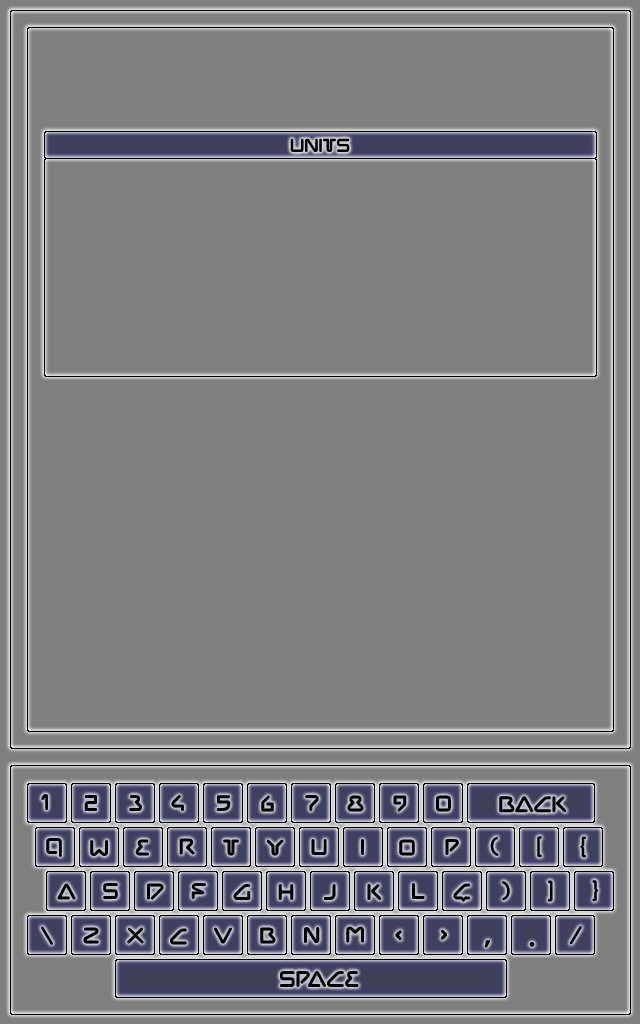
<style>
.page{position:relative;width:640px;height:1024px;background:#7f7f7f}
.page>*{position:absolute;margin:0}
.t1{font:20px "Chilopod-Regular";color:#000000}
.t2{font:24px "Chilopod-Regular";color:#000000}
</style>
<div class="page">
<p class="t1" style="left:290px;top:138px;width:60px;height:14px">Units</p>
<p class="t2" style="left:41px;top:794px;width:7px;height:16px">1</p>
<p class="t2" style="left:84px;top:795px;width:13px;height:16px">2</p>
<p class="t2" style="left:129px;top:795px;width:13px;height:16px">3</p>
<p class="t2" style="left:171px;top:795px;width:13px;height:16px">4</p>
<p class="t2" style="left:216px;top:795px;width:15px;height:16px">5</p>
<p class="t2" style="left:261px;top:795px;width:13px;height:17px">6</p>
<p class="t2" style="left:305px;top:795px;width:14px;height:16px">7</p>
<p class="t2" style="left:347px;top:795px;width:17px;height:17px">8</p>
<p class="t2" style="left:393px;top:795px;width:14px;height:17px">9</p>
<p class="t2" style="left:436px;top:795px;width:15px;height:17px">0</p>
<p class="t2" style="left:499px;top:796px;width:68px;height:17px">Back</p>
<p class="t2" style="left:46px;top:838px;width:16px;height:19px">q</p>
<p class="t2" style="left:90px;top:840px;width:18px;height:16px">w</p>
<p class="t2" style="left:135px;top:839px;width:14px;height:17px">e</p>
<p class="t2" style="left:179px;top:838px;width:16px;height:17px">r</p>
<p class="t2" style="left:223px;top:839px;width:16px;height:17px">t</p>
<p class="t2" style="left:266px;top:839px;width:18px;height:17px">y</p>
<p class="t2" style="left:311px;top:839px;width:16px;height:16px">u</p>
<p class="t2" style="left:361px;top:839px;width:3px;height:16px">i</p>
<p class="t2" style="left:399px;top:839px;width:16px;height:17px">o</p>
<p class="t2" style="left:445px;top:839px;width:14px;height:16px">p</p>
<p class="t2" style="left:490px;top:836px;width:9px;height:20px">(</p>
<p class="t2" style="left:537px;top:836px;width:5px;height:22px">[</p>
<p class="t2" style="left:580px;top:836px;width:6px;height:22px">{</p>
<p class="t2" style="left:502px;top:881px;width:8px;height:20px">)</p>
<p class="t2" style="left:548px;top:880px;width:5px;height:22px">]</p>
<p class="t2" style="left:592px;top:880px;width:7px;height:22px">}</p>
<p class="t2" style="left:57px;top:883px;width:19px;height:17px">a</p>
<p class="t2" style="left:103px;top:883px;width:15px;height:16px">s</p>
<p class="t2" style="left:147px;top:883px;width:17px;height:17px">d</p>
<p class="t2" style="left:191px;top:883px;width:15px;height:16px">f</p>
<p class="t2" style="left:233px;top:884px;width:18px;height:16px">g</p>
<p class="t2" style="left:278px;top:884px;width:16px;height:16px">h</p>
<p class="t2" style="left:324px;top:884px;width:12px;height:16px">j</p>
<p class="t2" style="left:367px;top:884px;width:15px;height:16px">k</p>
<p class="t2" style="left:412px;top:883px;width:13px;height:16px">l</p>
<p class="t2" style="left:453px;top:883px;width:18px;height:19px">ç</p>
<p class="t2" style="left:41px;top:926px;width:12px;height:19px">\</p>
<p class="t2" style="left:83px;top:927px;width:16px;height:17px">z</p>
<p class="t2" style="left:127px;top:927px;width:17px;height:17px">x</p>
<p class="t2" style="left:170px;top:928px;width:17px;height:17px">c</p>
<p class="t2" style="left:214px;top:927px;width:18px;height:17px">v</p>
<p class="t2" style="left:260px;top:927px;width:16px;height:17px">b</p>
<p class="t2" style="left:304px;top:927px;width:16px;height:16px">n</p>
<p class="t2" style="left:346px;top:926px;width:18px;height:17px">m</p>
<p class="t2" style="left:441px;top:929px;width:7px;height:11px">&gt;</p>
<p class="t2" style="left:569px;top:926px;width:13px;height:19px">/</p>
<p class="t2" style="left:395px;top:930px;width:7px;height:11px">&lt;</p>
<p class="t2" style="left:484px;top:940px;width:6px;height:8px">,</p>
<p class="t2" style="left:529px;top:942px;width:6px;height:5px">.</p>
<p class="t2" style="left:280px;top:971px;width:79px;height:16px">space</p>
</div>
